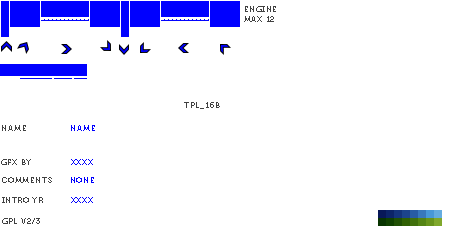
<style>
.page{position:relative;width:450px;height:230px;background:#ffffff}
.page>*{position:absolute;margin:0}
.t1{font:8px "Museo700-Regular";letter-spacing:0.075em;color:#404040;text-transform:uppercase}
.t2{font:8px "Museo700-Regular";letter-spacing:0.075em;color:#0000ff;text-transform:uppercase}
</style>
<div class="page">
<p class="t1" style="left:244px;top:6px;width:32px;height:16px">engine<br>max 12</p>
<p class="t1" style="left:184px;top:102px;width:36px;height:7px">tpl_16b</p>
<p class="t1" style="left:2px;top:125px;width:24px;height:6px">name</p>
<p class="t2" style="left:71px;top:125px;width:24px;height:6px">name</p>
<p class="t1" style="left:1px;top:159px;width:30px;height:6px">gfx by</p>
<p class="t2" style="left:71px;top:159px;width:22px;height:6px">xxxx</p>
<p class="t1" style="left:2px;top:177px;width:50px;height:6px">comments</p>
<p class="t2" style="left:71px;top:177px;width:23px;height:6px">none</p>
<p class="t1" style="left:2px;top:197px;width:41px;height:6px">intro yr</p>
<p class="t2" style="left:71px;top:197px;width:22px;height:6px">xxxx</p>
<p class="t1" style="left:2px;top:218px;width:38px;height:6px">gpl v2/3</p>
</div>
